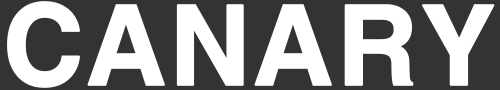
<style>
.page{position:relative;width:500px;height:90px;background:#333333}
.page>*{position:absolute;margin:0}
.t1{font:127.5px "HacenExtenderX4Deeper";color:#ffffff;font-weight:bold}
</style>
<div class="page">
<p class="t1" style="left:7px;top:1px;width:488px;height:87px">CANARY</p>
</div>
